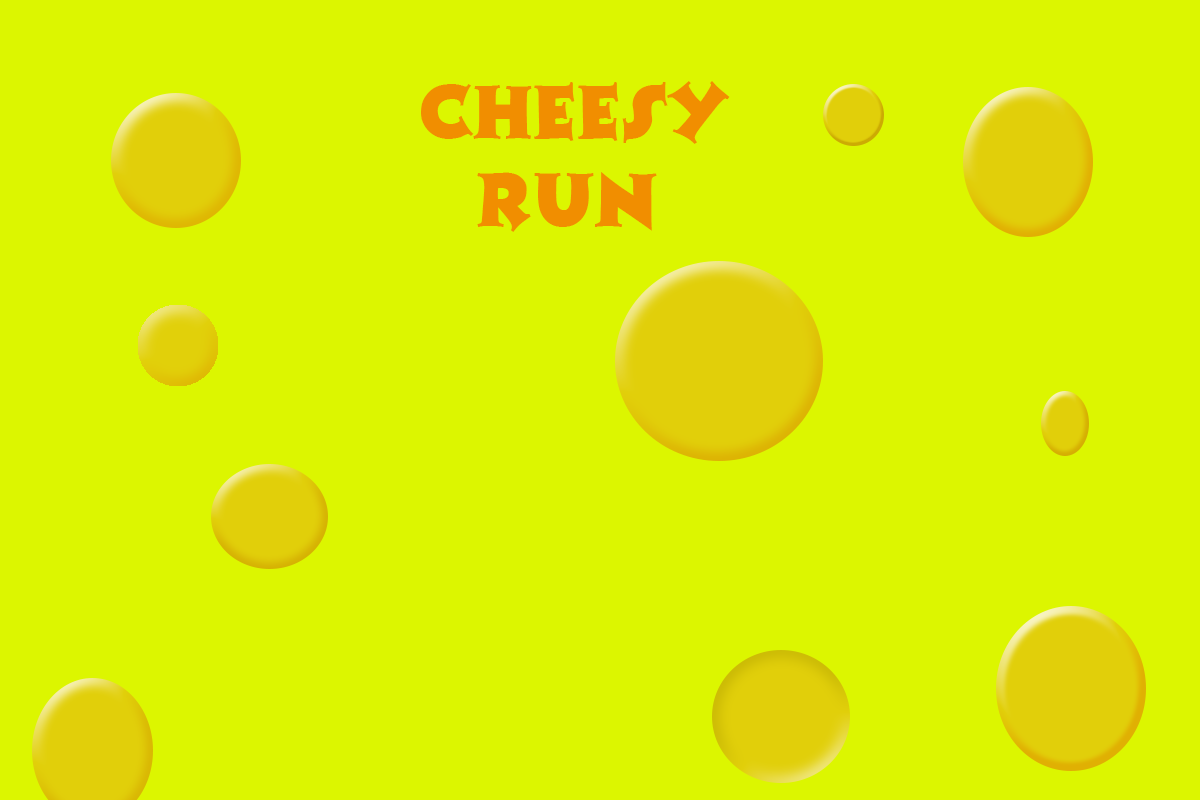
<style>
.page{position:relative;width:1200px;height:800px;background:#dcf600}
.page>*{position:absolute;margin:0}
.t1{font:72px "Colbert";color:#f18e00}
</style>
<div class="page">
<p class="t1" style="left:421px;top:81px;width:309px;height:63px">CHEESY</p>
<p class="t1" style="left:477px;top:172px;width:180px;height:60px">RUN</p>
</div>
